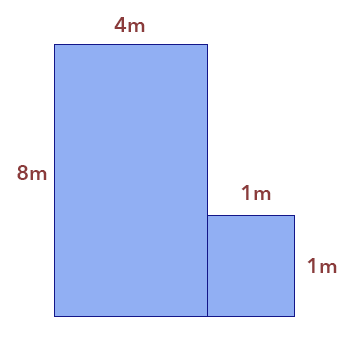
<style>
.page{position:relative;width:360px;height:360px;background:#ffffff}
.page>*{position:absolute;margin:0}
.t1{font:20.8px "AvenirNext-DemiBold";color:#8b3b3b}
</style>
<div class="page">
<p class="t1" style="left:114px;top:17px;width:31px;height:15px">4m</p>
<p class="t1" style="left:17px;top:165px;width:30px;height:15px">8m</p>
<p class="t1" style="left:241px;top:185px;width:30px;height:15px">1m</p>
<p class="t1" style="left:307px;top:258px;width:30px;height:15px">1m</p>
</div>
